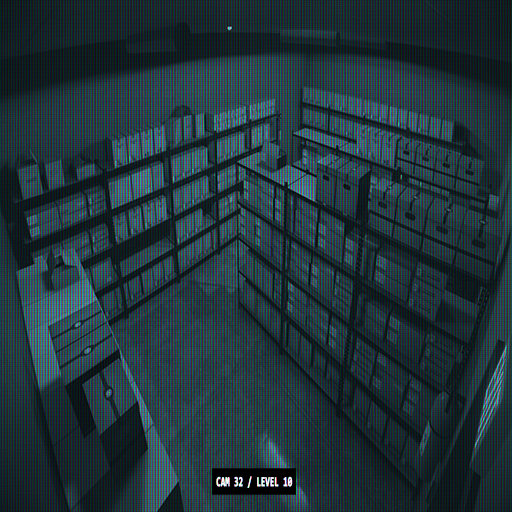
<style>
.page{position:relative;width:512px;height:512px}
.page>*{position:absolute;margin:0}
.t1{font:13.7px "Consolas-Bold";color:#ffffff;font-weight:bold;scale:0.56 1}
</style>
<div class="page">
<p class="t1" style="left:216px;top:476px;width:77px;height:12px">CAM 32 / LEVEL 10</p>
</div>
